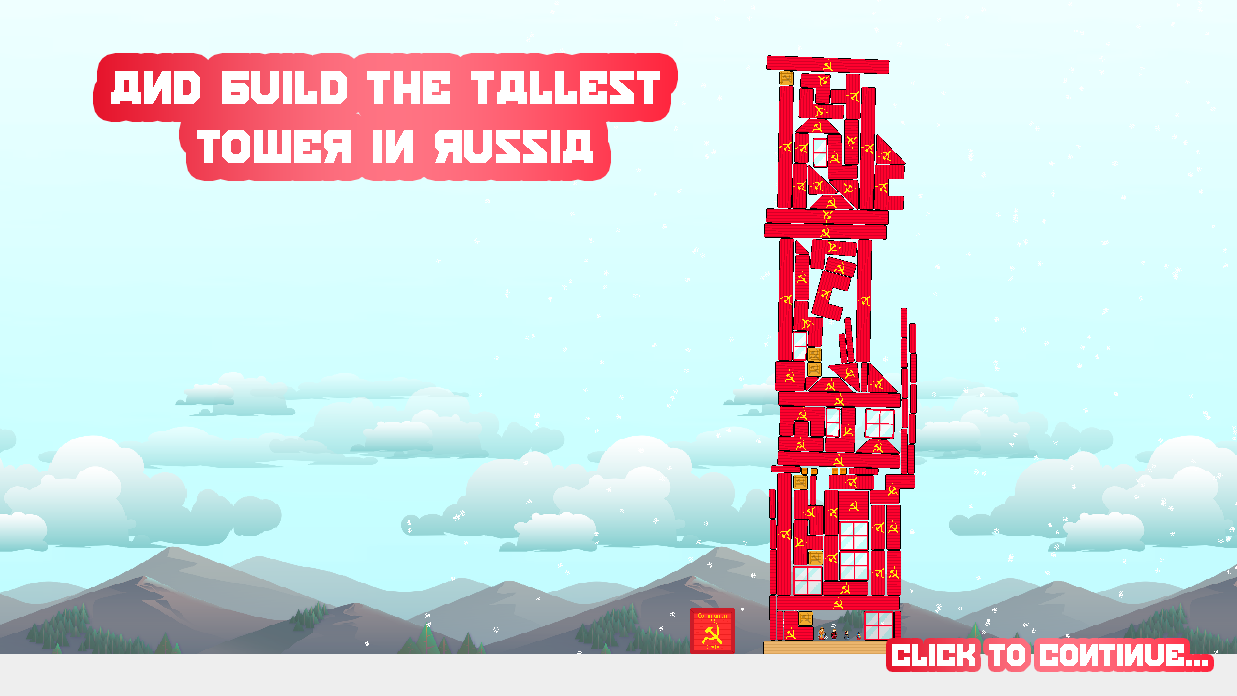
<style>
.page{position:relative;width:1237px;height:696px}
.page>*{position:absolute;margin:0}
.t1{font:49px "Kalinka-Regular";color:#ffffff}
.t2{font:33px "Kalinka-Regular";color:#ffffff}
</style>
<div class="page">
<p class="t1" style="left:111px;top:71px;width:549px;height:92px;text-align:center">and build the tallest <br>tower in russia</p>
<p class="t2" style="left:892px;top:644px;width:316px;height:22px">Click to continue...</p>
</div>
